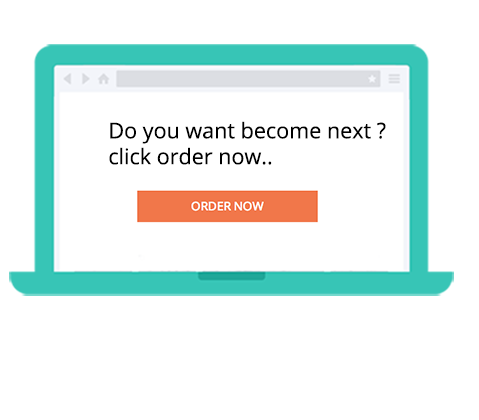
<style>
.page{position:relative;width:479px;height:420px;background:#ffffff}
.page>*{position:absolute;margin:0}
.t1{font:21.6px "OpenSans";color:#000000}
</style>
<div class="page">
<p class="t1" style="left:109px;top:121px;width:277px;height:44px">Do you want become next ?<br>click order now..</p>
</div>
